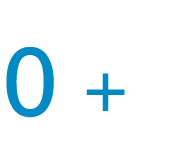
<style>
.page{position:relative;width:185px;height:164px;background:#ffffff}
.page>*{position:absolute;margin:0}
.t1{font:100px "Rockwell";color:#038ac5}
.t2{font:70px "Rockwell";color:#038ac5}
</style>
<div class="page">
<p class="t1" style="left:6px;top:47px;width:119px;height:71px">0 <span class="t2">+</span></p>
</div>
